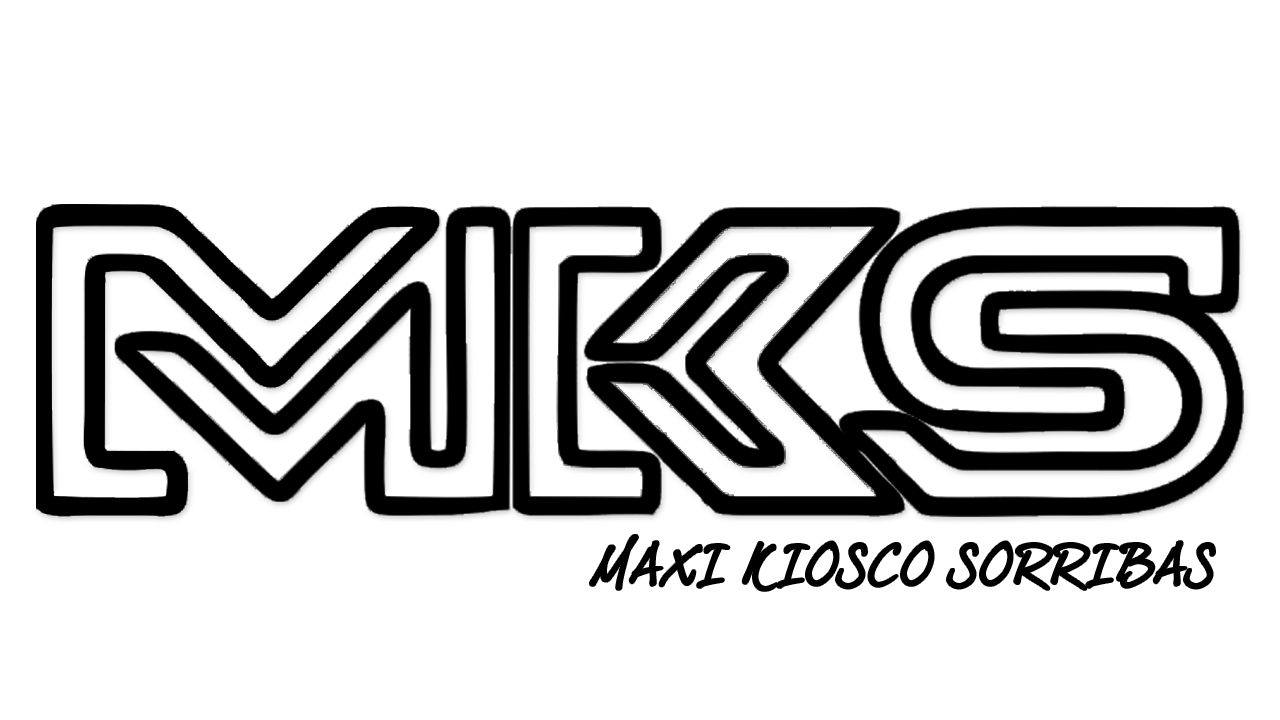
<style>
.page{position:relative;width:1280px;height:720px;background:#ffffff}
.page>*{position:absolute;margin:0}
.t1{font:50.8px "dearJoe5CASUAL-P";color:#000000;font-weight:bold}
</style>
<div class="page">
<p class="t1" style="left:590px;top:535px;width:625px;height:56px">MAXI KIOSCO SORRIBAS</p>
</div>
